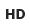
<style>
.page{position:relative;width:30px;height:28px;background:#ffffff}
.page>*{position:absolute;margin:0}
.t1{font:13px "Lato-Black";letter-spacing:0.05em;color:#262626}
</style>
<div class="page">
<p class="t1" style="left:6px;top:9px;width:19px;height:10px">HD</p>
</div>
